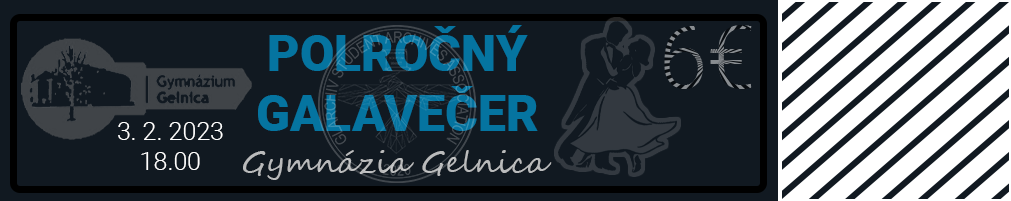
<style>
.page{position:relative;width:1011px;height:201px;background:#111921}
.page>*{position:absolute;margin:0}
.t1{font:50px "Roboto-Black";color:#0574a0}
.t2{font:25px "Roboto-Light";color:#ffffff}
.t3{font:30px "SegoeScript";color:#babbbc}
</style>
<div class="page">
<p class="t1" style="left:258px;top:25px;width:280px;height:106px;text-align:center">POLROČNÝ<br>GALAVEČER</p>
<p class="t2" style="left:118px;top:122px;width:105px;height:48px;text-align:center">3. 2. 2023<br>18.00</p>
<p class="t3" style="left:243px;top:150px;width:309px;height:30px">Gymnázia Gelnica</p>
</div>
